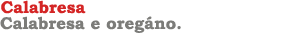
<style>
.page{position:relative;width:300px;height:50px;background:#ffffff}
.page>*{position:absolute;margin:0}
.t1{font:17px "BookmanOldStyle-Bold";color:#d42525}
.t2{font:17px "BookmanOldStyle-Bold";color:#7c7c79}
</style>
<div class="page">
<p class="t1" style="left:1px;top:0px;width:85px;height:14px">Calabresa</p>
<p class="t2" style="left:0px;top:16px;width:181px;height:17px">Calabresa e oregáno.</p>
</div>
